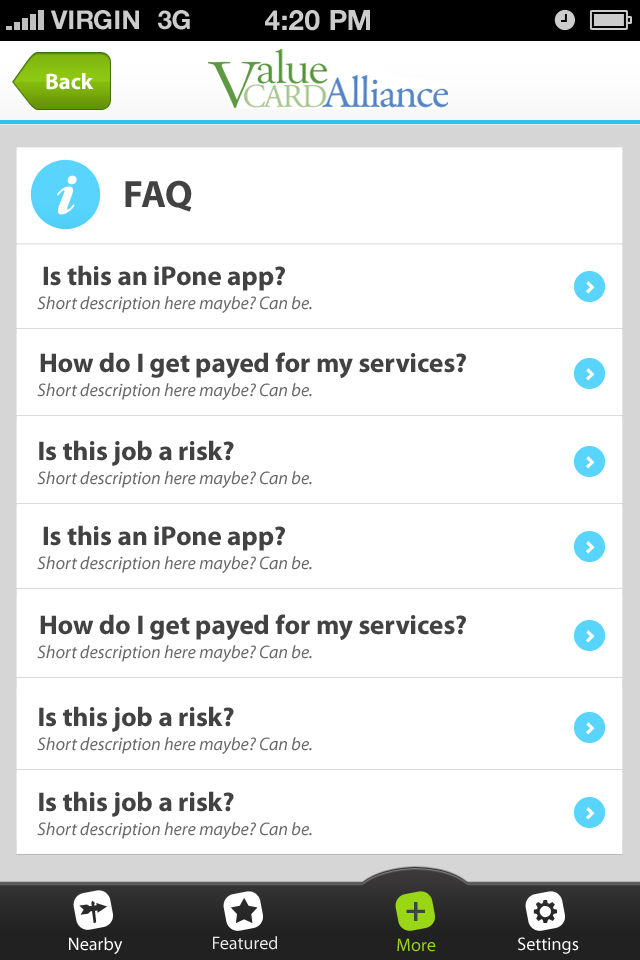
<style>
.page{position:relative;width:640px;height:960px;background:#ffffff}
.page>*{position:absolute;margin:0}
.t1{font:26px "HelveticaNeue-Bold";color:#cccccc;text-transform:uppercase}
.t2{font:28px "HelveticaNeue-Bold";color:#cccccc;text-transform:uppercase}
.t3{font:22.6px "MyriadPro-Bold";color:#ffffff}
.t4{font:38.4px "MyriadPro-Bold";color:#424242}
.t5{font:27.2px "MyriadPro-Bold";color:#424242}
.t6{font:18.1px "MyriadPro-It";color:#686868}
.t7{font:36px "MyriadPro-Bold";color:#3d4548}
.t8{font:18.1px "MyriadPro-Regular";color:#ffffff}
.t9{font:18.1px "MyriadPro-Regular";color:#e9e9e9}
.t10{font:18.1px "MyriadPro-Regular";color:#99d615}
</style>
<div class="page">
<p class="t1" style="left:50px;top:10px;width:89px;height:20px">VIRGIN</p>
<p class="t1" style="left:158px;top:10px;width:32px;height:20px">3G</p>
<p class="t2" style="left:265px;top:10px;width:105px;height:21px">4:20 pM</p>
<p class="t3" style="left:46px;top:73px;width:48px;height:17px">Back</p>
<p class="t4" style="left:125px;top:180px;width:67px;height:32px">FAQ</p>
<p class="t5" style="left:43px;top:265px;width:242px;height:26px">Is this an iPone app?</p>
<p class="t6" style="left:37px;top:296px;width:275px;height:17px">Short description here maybe? Can be.</p>
<p class="t5" style="left:40px;top:352px;width:426px;height:26px">How do I get payed for my services?</p>
<p class="t6" style="left:37px;top:383px;width:275px;height:17px">Short description here maybe? Can be.</p>
<p class="t5" style="left:39px;top:440px;width:195px;height:26px">Is this job a risk?</p>
<p class="t6" style="left:37px;top:471px;width:275px;height:17px">Short description here maybe? Can be.</p>
<p class="t5" style="left:43px;top:525px;width:242px;height:26px">Is this an iPone app?</p>
<p class="t6" style="left:37px;top:556px;width:275px;height:17px">Short description here maybe? Can be.</p>
<p class="t5" style="left:40px;top:614px;width:426px;height:26px">How do I get payed for my services?</p>
<p class="t6" style="left:37px;top:645px;width:275px;height:17px">Short description here maybe? Can be.</p>
<p class="t5" style="left:39px;top:706px;width:195px;height:26px">Is this job a risk?</p>
<p class="t6" style="left:37px;top:737px;width:275px;height:17px">Short description here maybe? Can be.</p>
<p class="t5" style="left:39px;top:791px;width:195px;height:26px">Is this job a risk?</p>
<p class="t6" style="left:37px;top:822px;width:275px;height:17px">Short description here maybe? Can be.</p>
<p class="t7" style="left:406px;top:902px;width:19px;height:19px">+</p>
<p class="t8" style="left:69px;top:937px;width:54px;height:17px">Nearby</p>
<p class="t9" style="left:213px;top:936px;width:64px;height:14px">Featured</p>
<p class="t10" style="left:397px;top:938px;width:39px;height:14px">More</p>
<p class="t8" style="left:518px;top:937px;width:61px;height:17px">Settings</p>
</div>
